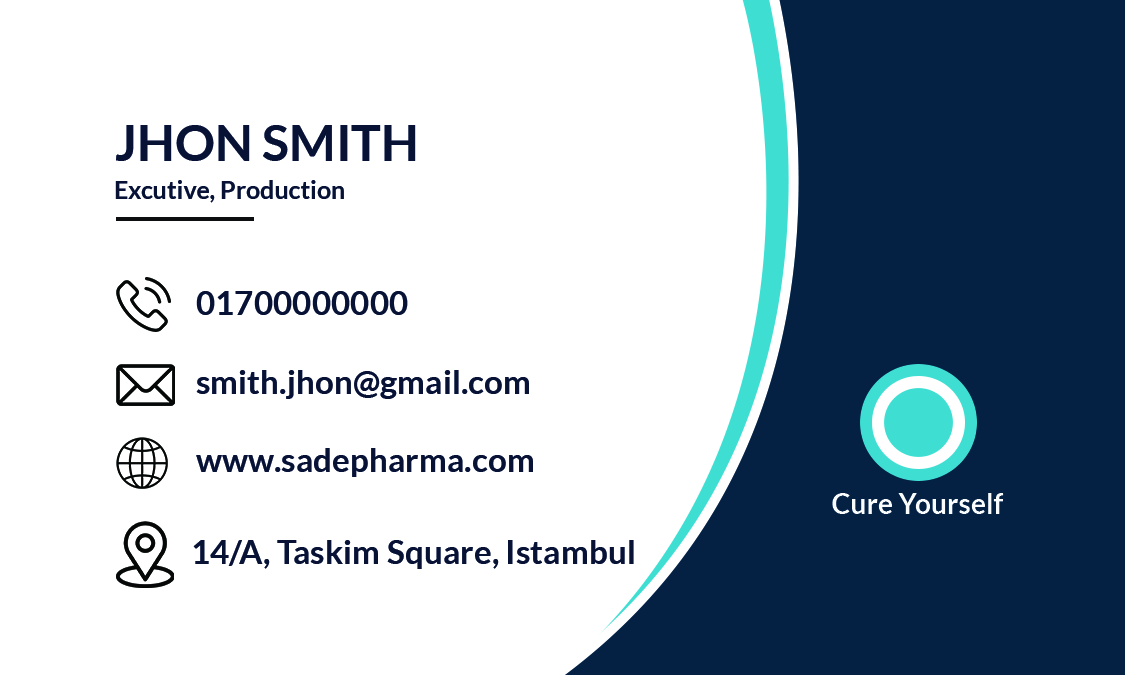
<style>
.page{position:relative;width:1125px;height:675px;background:#ffffff}
.page>*{position:absolute;margin:0}
.t1{font:50px "Lato-Bold";color:#081234}
.t2{font:25px "Lato-Bold";color:#081234}
.t3{font:33.3px "Lato-Bold";color:#081234}
.t4{font:28.2px "Lato-Bold";color:#fafcfd}
</style>
<div class="page">
<p class="t1" style="left:116px;top:125px;width:300px;height:36px">JHON SMITH</p>
<p class="t2" style="left:115px;top:180px;width:229px;height:23px">Excutive, Production</p>
<p class="t3" style="left:196px;top:291px;width:212px;height:24px">01700000000</p>
<p class="t3" style="left:196px;top:370px;width:333px;height:29px">smith.jhon@gmail.com</p>
<p class="t3" style="left:196px;top:448px;width:337px;height:29px">www.sadepharma.com</p>
<p class="t4" style="left:832px;top:493px;width:172px;height:21px">Cure Yourself</p>
<p class="t3" style="left:193px;top:540px;width:441px;height:29px">14/A, Taskim Square, Istambul</p>
</div>
